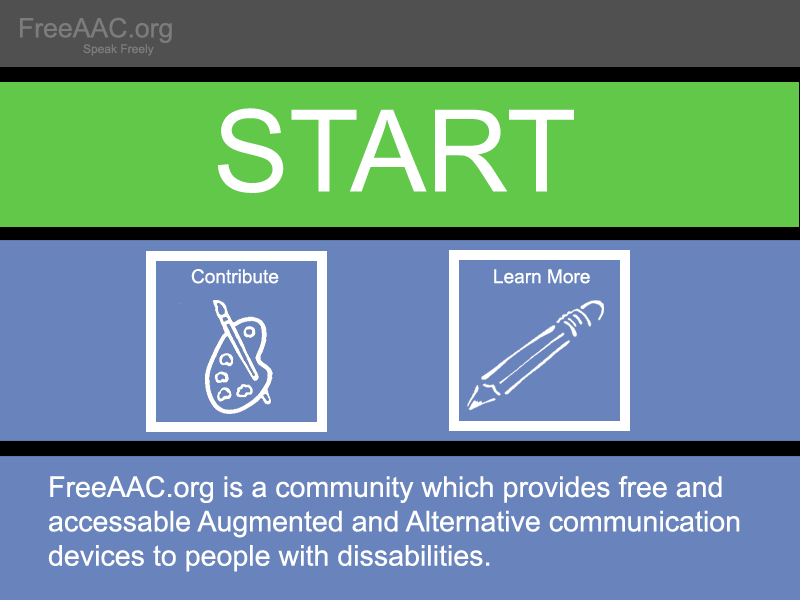
<style>
.page{position:relative;width:800px;height:600px;background:#6984bc}
.page>*{position:absolute;margin:0}
.t1{font:26.6px "ArialMT";color:#7c7c7c}
.t2{font:12px "ArialMT";color:#7c7c7c}
.t3{font:114px "ArialMT";color:#ffffff}
.t4{font:19.1px "ArialMT";color:#ffffff}
.t5{font:28.6px "ArialMT";color:#ffffff}
</style>
<div class="page">
<p class="t1" style="left:20px;top:17px;width:152px;height:26px">FreeAAC.org</p>
<p class="t2" style="left:83px;top:44px;width:71px;height:12px">Speak Freely</p>
<p class="t3" style="left:218px;top:108px;width:356px;height:85px">START</p>
<p class="t4" style="left:191px;top:269px;width:88px;height:15px">Contribute</p>
<p class="t4" style="left:494px;top:269px;width:96px;height:15px">Learn More</p>
<p class="t5" style="left:48px;top:476px;width:692px;height:96px">FreeAAC.org is a community which provides free and <br>accessable Augmented and Alternative communication <br>devices to people with dissabilities.</p>
</div>
